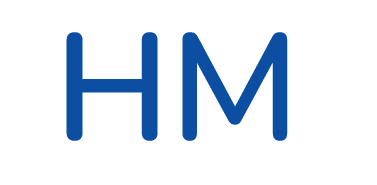
<style>
.page{position:relative;width:377px;height:185px;background:#ffffff}
.page>*{position:absolute;margin:0}
.t1{font:150.7px "Nunito-SemiBold";color:#0c4fa2}
</style>
<div class="page">
<p class="t1" style="left:66px;top:32px;width:222px;height:109px">HM</p>
</div>
